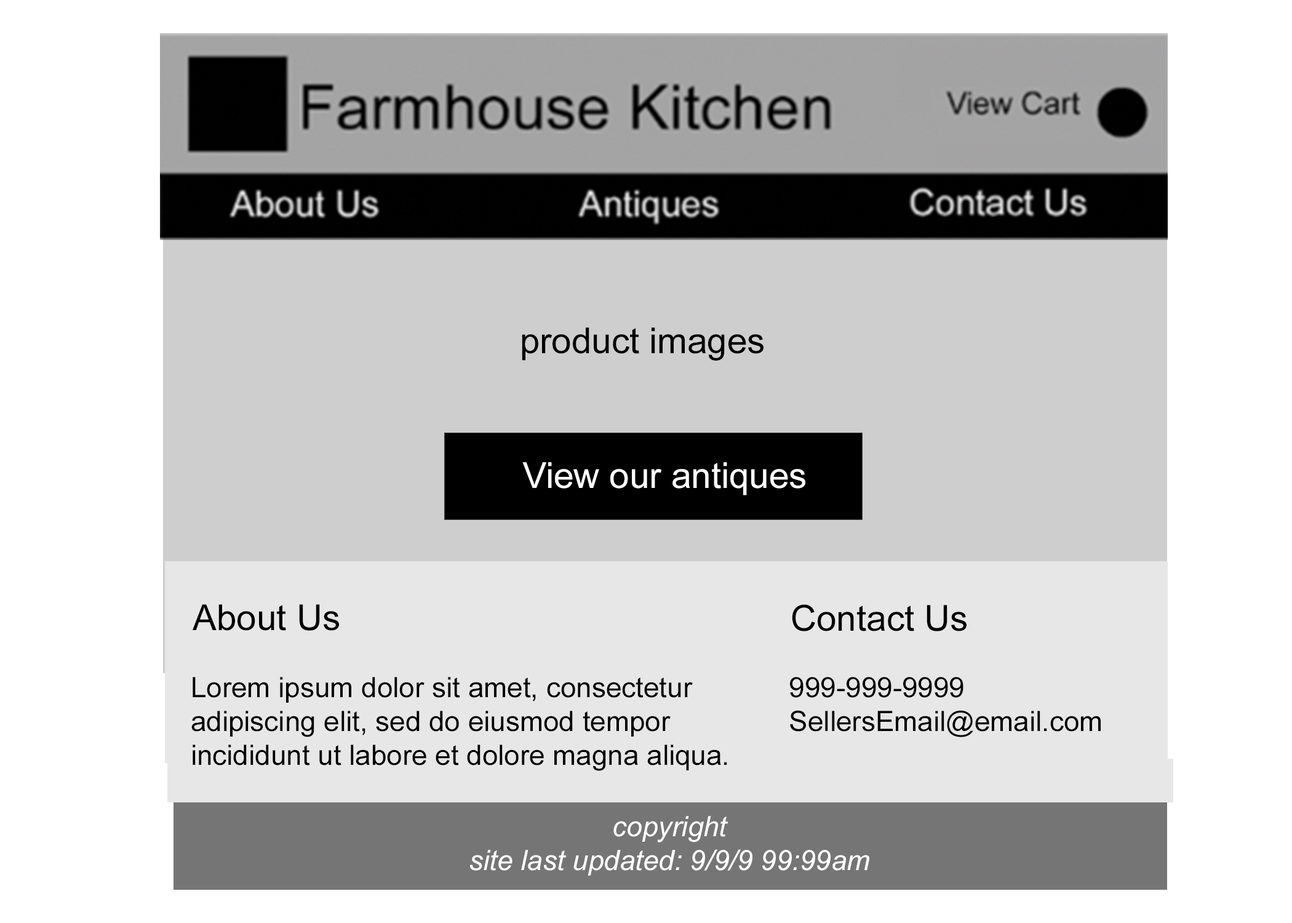
<style>
.page{position:relative;width:1292px;height:923px;background:#ffffff}
.page>*{position:absolute;margin:0}
.t1{font:61.5px "ArialMT"}
.t2{font:35.9px "ArialMT"}
.t3{font:35.9px "ArialMT";color:#000000}
.t4{font:35.9px "ArialMT";color:#ffffff}
.t5{font:28.2px "ArialMT";color:#000000}
.t6{font:28.2px "Arial-ItalicMT";color:#ffffff}
</style>
<div class="page">
<p class="t1" style="left:304px;top:84px;width:525px;height:45px">Farmhouse Kitchen</p>
<p class="t2" style="left:231px;top:190px;width:147px;height:26px">About Us</p>
<p class="t2" style="left:578px;top:190px;width:138px;height:33px">Antiques</p>
<p class="t3" style="left:522px;top:327px;width:242px;height:34px">product images</p>
<p class="t4" style="left:522px;top:462px;width:283px;height:33px">View our antiques</p>
<p class="t3" style="left:193px;top:604px;width:146px;height:27px">About Us</p>
<p class="t3" style="left:792px;top:604px;width:175px;height:27px">Contact Us</p>
<p class="t5" style="left:191px;top:677px;width:536px;height:94px">Lorem ipsum dolor sit amet, consectetur <br>adipiscing elit, sed do eiusmod tempor <br>incididunt ut labore et dolore magna aliqua.</p>
<p class="t5" style="left:790px;top:677px;width:311px;height:60px">999-999-9999<br>SellersEmail@email.com</p>
<p class="t6" style="left:470px;top:816px;width:399px;height:60px;text-align:center">copyright<br>site last updated: 9/9/9 99:99am</p>
</div>
